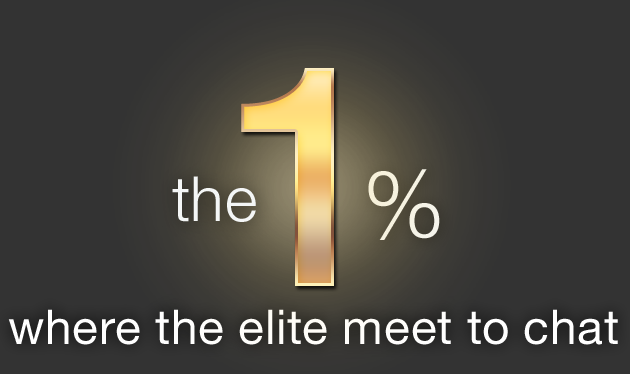
<style>
.page{position:relative;width:630px;height:374px;background:#333333}
.page>*{position:absolute;margin:0}
.t1{font:311.5px "HelveticaNeue-Medium";letter-spacing:0.005em}
.t2{font:93.4px "HelveticaNeue-Light";letter-spacing:0.005em;color:#f4f6f6}
.t3{font:62.3px "HelveticaNeue-Light";letter-spacing:0.025em;color:#f4f6f6}
.t4{font:48px "HelveticaNeueLTPro-Roman";letter-spacing:0.01em;color:#ffffff}
</style>
<div class="page">
<p class="t1" style="left:241px;top:68px;width:93px;height:218px">1</p>
<p class="t2" style="left:368px;top:169px;width:72px;height:71px">%</p>
<p class="t3" style="left:172px;top:176px;width:84px;height:46px">the</p>
<p class="t4" style="left:8px;top:309px;width:610px;height:36px">where the elite meet to chat</p>
</div>
